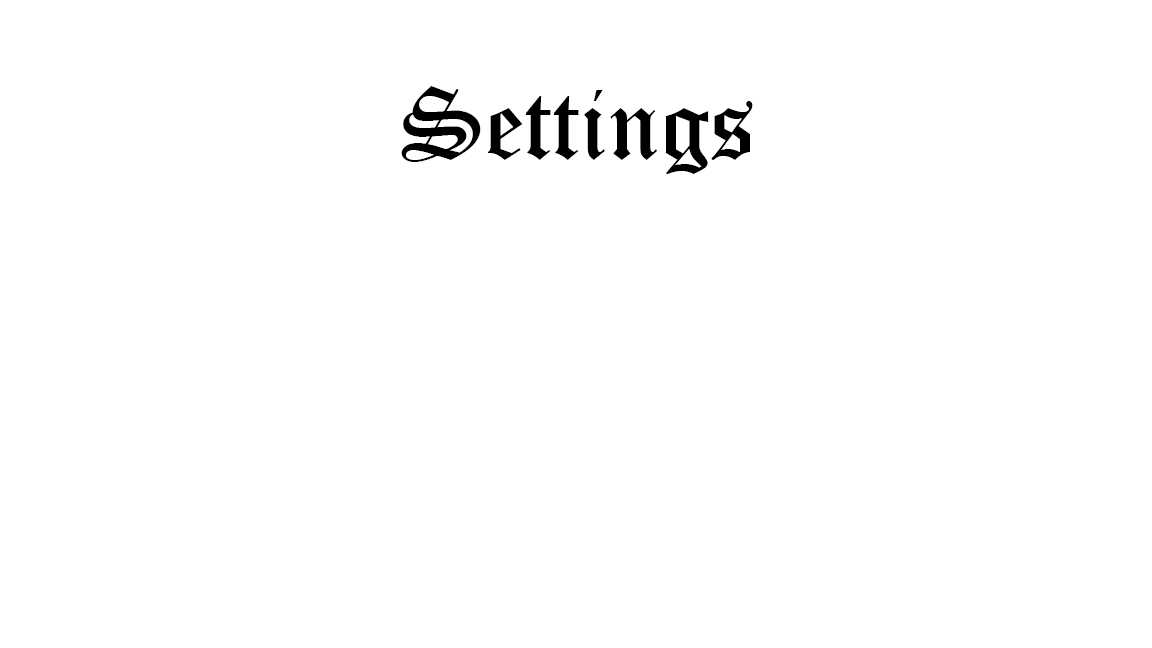
<style>
.page{position:relative;width:1152px;height:648px;background:#ffffff}
.page>*{position:absolute;margin:0}
.t1{font:100px "OldEnglishTextMT";color:#000000}
</style>
<div class="page">
<p class="t1" style="left:401px;top:86px;width:352px;height:89px">Settings</p>
</div>
